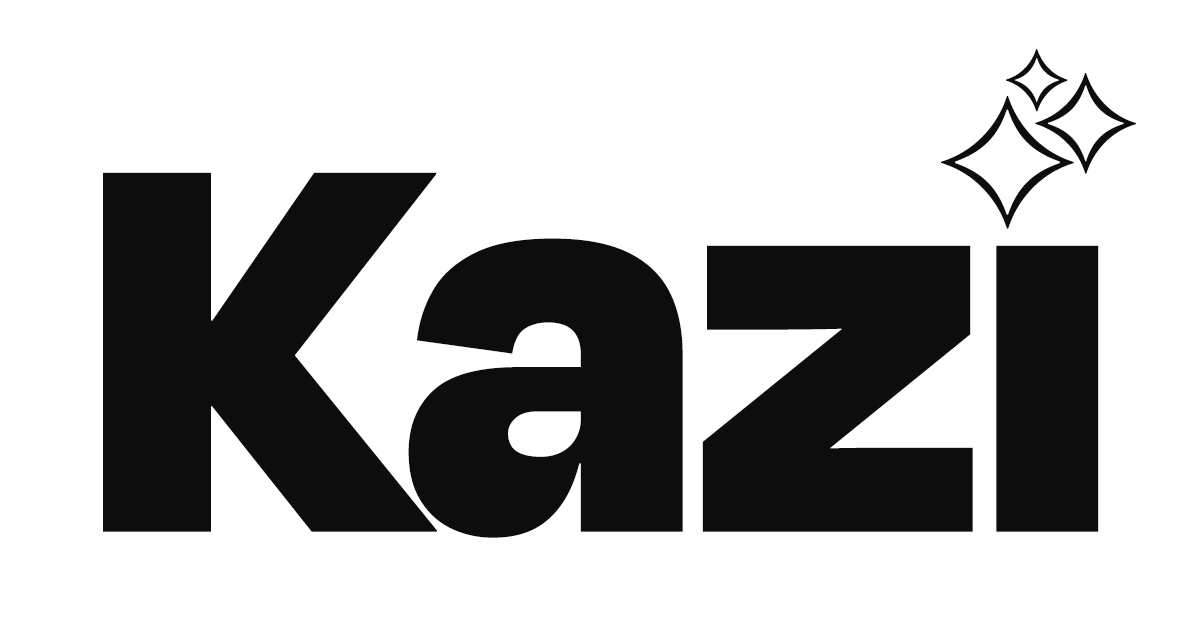
<style>
.page{position:relative;width:1200px;height:630px;background:#ffffff}
.page>*{position:absolute;margin:0}
.t1{font:216.4px "DegularVariable-DisplayBlack";color:#0d0d0d}
.t2{font:597.9px "DegularVariable-DisplayBlack";color:#0d0d0d}
</style>
<div class="page">
<p class="t1" style="left:941px;top:49px;width:195px;height:180px">✨</p>
<p class="t2" style="left:103px;top:165px;width:996px;height:373px">Kazi</p>
</div>
